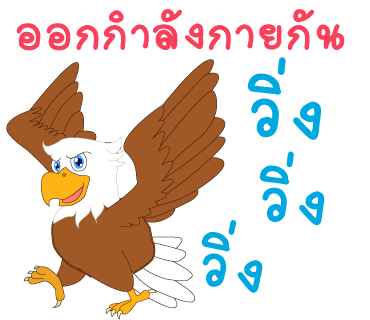
<style>
.page{position:relative;width:370px;height:320px;background:#ffffff}
.page>*{position:absolute;margin:0}
.t1{font:70px "2005_iannnnnMTV";letter-spacing:0.025em;color:#fa405a;scale:1.06 1}
.t2{font:104px "2005_iannnnnMTV";letter-spacing:0.025em;color:#00a8e1;scale:1.06 1}
.t3{font:92px "2005_iannnnnMTV";letter-spacing:0.025em;color:#00a8e1;scale:1.06 1}
.t4{font:89px "2005_iannnnnMTV";letter-spacing:0.025em;color:#00a8e1;scale:1.06 1}
</style>
<div class="page">
<p class="t1" style="left:16px;top:9px;width:329px;height:42px">ออกกำลังกายกัน</p>
<p class="t2" style="left:247px;top:57px;width:74px;height:83px;rotate:6deg">วิ่ง</p>
<p class="t3" style="left:259px;top:151px;width:65px;height:75px;rotate:7deg">วิ่ง</p>
<p class="t4" style="left:201px;top:219px;width:62px;height:74px;rotate:12deg">วิ่ง</p>
</div>
